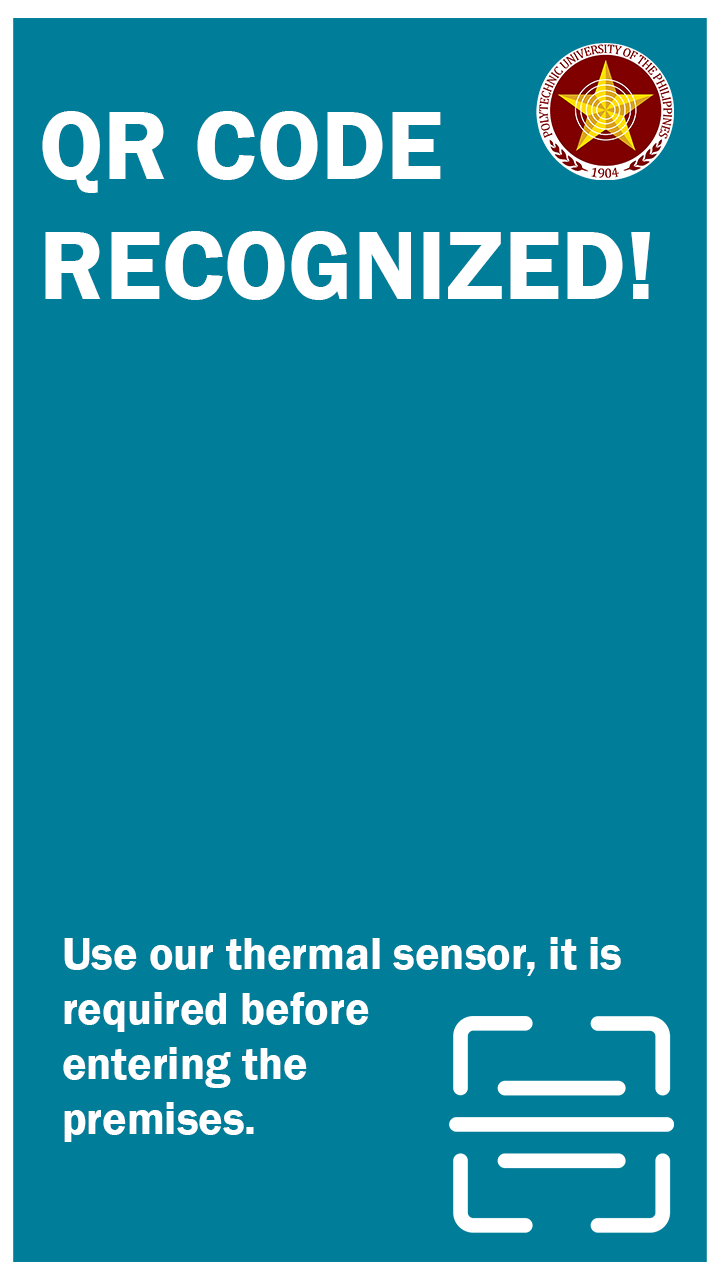
<style>
.page{position:relative;width:720px;height:1280px;background:#007d99}
.page>*{position:absolute;margin:0}
.t1{font:100px "FranklinGothic-Demi";color:#ffffff}
.t2{font:45.8px "FranklinGothic-Demi";color:#ffffff}
</style>
<div class="page">
<p class="t1" style="left:42px;top:111px;width:608px;height:189px">QR CODE<br>RECOGNIZED!</p>
<p class="t2" style="left:63px;top:937px;width:558px;height:205px">Use our thermal sensor, it is required before<br>entering the<br>premises.</p>
</div>
